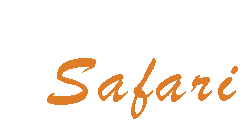
<style>
.page{position:relative;width:245px;height:120px;background:#ffffff}
.page>*{position:absolute;margin:0}
.t1{font:72px "BrushScriptMT";letter-spacing:0.075em;color:#de7c27}
</style>
<div class="page">
<p class="t1" style="left:47px;top:58px;width:191px;height:61px">Safari</p>
</div>
